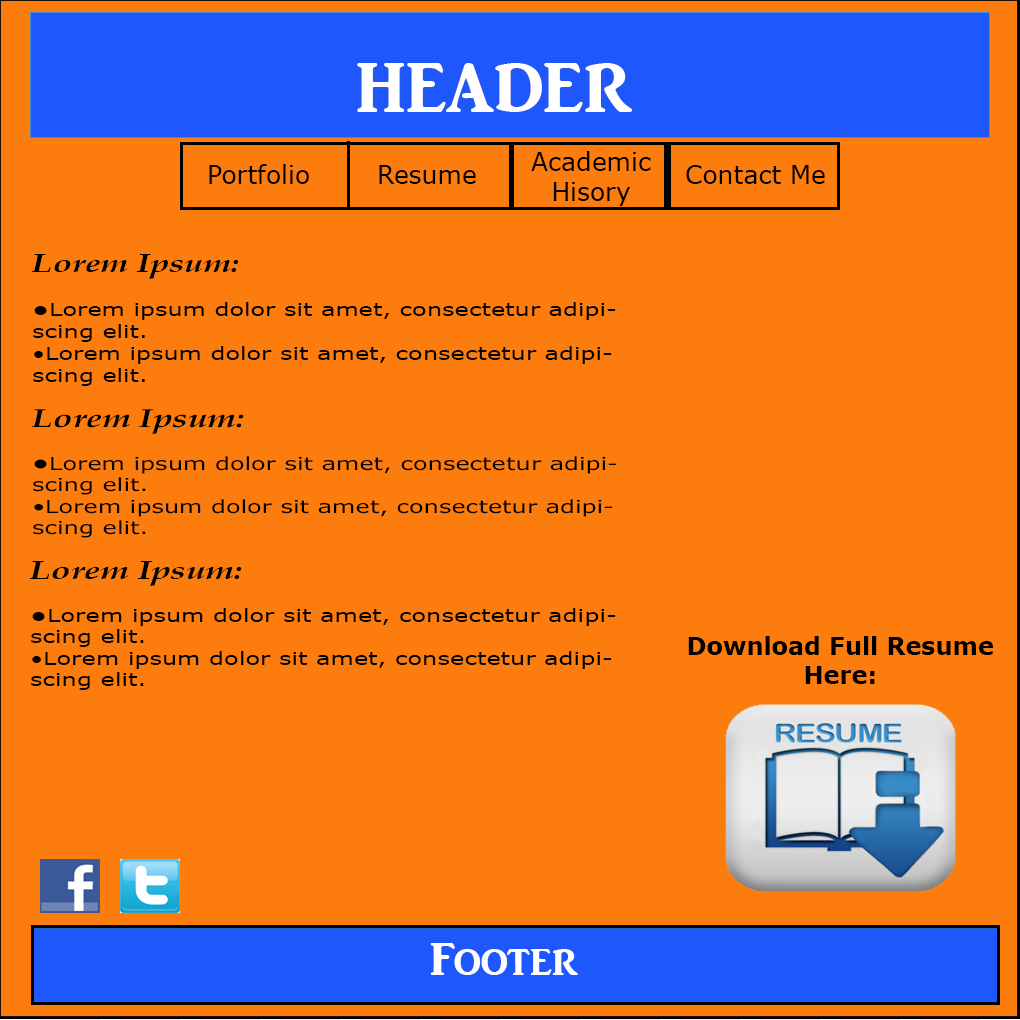
<style>
.page{position:relative;width:1020px;height:1020px;background:#fc7d0d}
.page>*{position:absolute;margin:0}
.t1{font:72px "ARJULIAN";color:#ffffff}
.t2{font:72px "ARJULIAN";color:#66ffff}
.t3{font:25px "Verdana";color:#000000}
.t4{font:18.4px "Verdana";color:#000000;scale:1.31 1}
.t5{font:26px "BookAntiqua-BoldItalic";color:#000000;scale:1.31 1}
.t6{font:18.4px "Verdana-Bold";color:#000000;scale:1.31 1}
.t7{font:18px "Verdana";color:#000000;scale:1.34 1}
.t8{font:26px "BookAntiqua-BoldItalic";color:#000000;scale:1.34 1}
.t9{font:18px "Verdana-Bold";color:#000000;scale:1.34 1}
.t10{font:24px "Verdana-Bold";color:#000000}
.t11{font:48px "ARJULIAN";color:#ffffff}
</style>
<div class="page">
<p class="t1" style="left:357px;top:63px;width:276px;height:49px">HEADER</p>
<p class="t1" style="left:357px;top:63px;width:276px;height:49px"><span class="t2"><br></span>HEADER</p>
<p class="t3" style="left:531px;top:151px;width:120px;height:55px;text-align:center">Academic<br>Hisory</p>
<p class="t3" style="left:209px;top:164px;width:100px;height:20px">Portfolio</p>
<p class="t3" style="left:379px;top:165px;width:97px;height:19px">Resume</p>
<p class="t3" style="left:686px;top:165px;width:139px;height:19px">Contact Me</p>
<p class="t4" style="left:32px;top:254px;width:584px;height:132px"><span class="t5">Lorem Ipsum: <br></span><span class="t6"><br>•</span>Lorem ipsum dolor sit amet, consectetur adipiscing elit.<br>•Lorem ipsum dolor sit amet, consectetur adipiscing elit.</p>
<p class="t7" style="left:32px;top:409px;width:584px;height:129px"><span class="t8">Lorem Ipsum: <br></span><span class="t9"><br>•</span>Lorem ipsum dolor sit amet, consectetur adipiscing elit.<br>•Lorem ipsum dolor sit amet, consectetur adipiscing elit.</p>
<p class="t7" style="left:29px;top:561px;width:587px;height:129px"><span class="t8">Lorem Ipsum: <br></span><span class="t9"><br>•</span>Lorem ipsum dolor sit amet, consectetur adipiscing elit.<br>•Lorem ipsum dolor sit amet, consectetur adipiscing elit.</p>
<p class="t10" style="left:688px;top:636px;width:305px;height:48px;text-align:center">Download Full Resume Here:</p>
<p class="t11" style="left:430px;top:943px;width:148px;height:32px">Footer</p>
</div>
